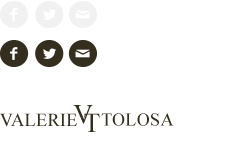
<style>
.page{position:relative;width:250px;height:150px;background:#ffffff}
.page>*{position:absolute;margin:0}
.t1{font:18.2px "TimesNewRomanPSMT";letter-spacing:0.02em;color:#342e1e}
.t2{font:27.4px "TimesNewRomanPSMT";letter-spacing:0.02em;color:#342e1e}
.t3{font:27.4px "TimesNewRomanPSMT";color:#342e1e}
.t4{font:18px "TimesNewRomanPSMT";letter-spacing:0.02em;color:#342e1e}
</style>
<div class="page">
<p class="t1" style="left:0px;top:113px;width:77px;height:14px">VALERIE</p>
<p class="t2" style="left:73px;top:105px;width:20px;height:19px">V</p>
<p class="t3" style="left:84px;top:113px;width:16px;height:19px">T</p>
<p class="t4" style="left:101px;top:113px;width:73px;height:13px">TOLOSA</p>
</div>
